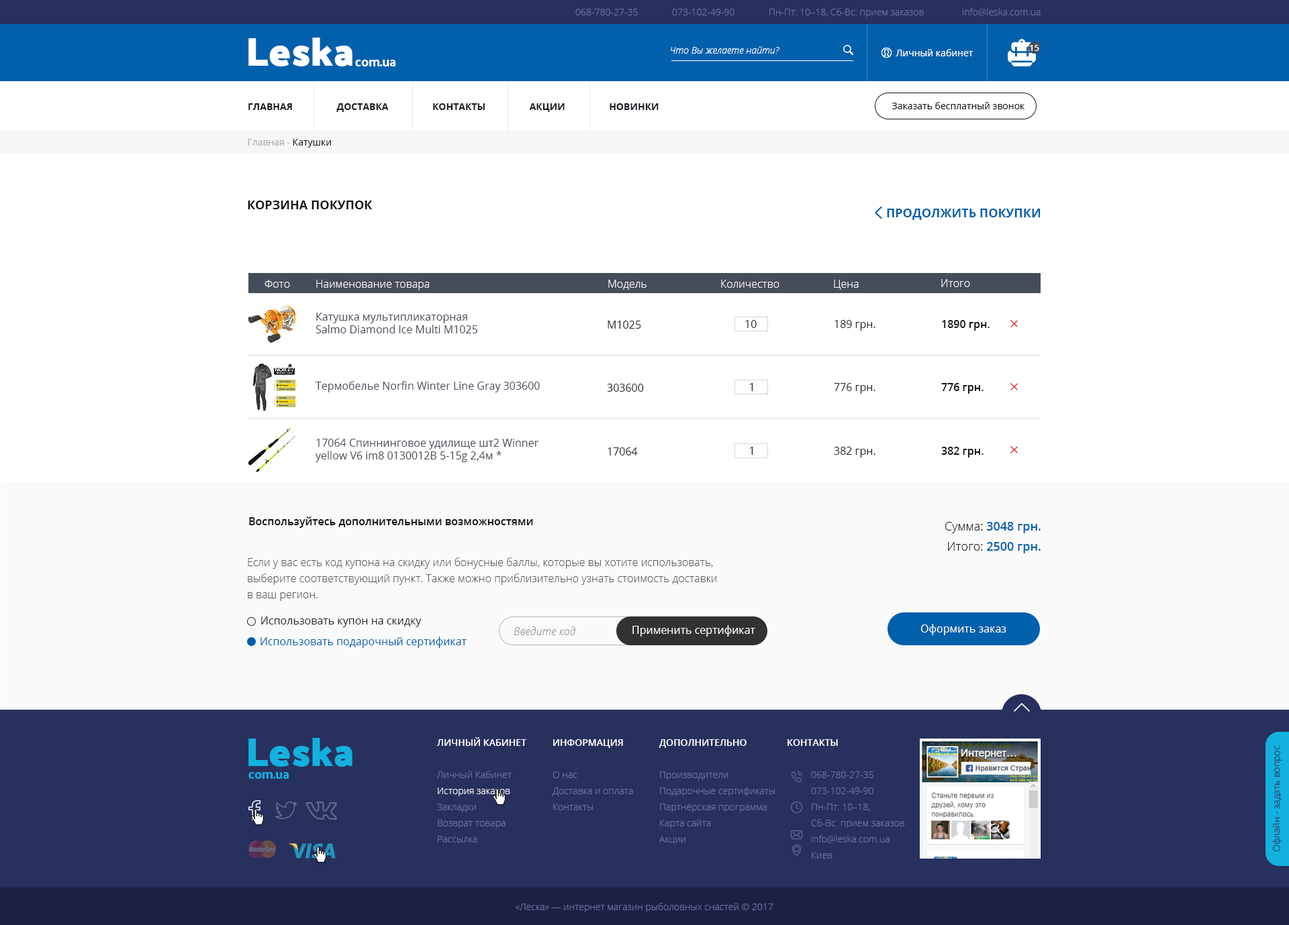
<style>
.page{position:relative;width:1289px;height:925px;background:#ffffff}
.page>*{position:absolute;margin:0}
.t1{font:9.4px "OpenSans-Light";color:#6973a9}
.t2{font:40.5px "PalanquinDark-Bold";color:#ffffff}
.t3{font:9.4px "OpenSansLight-Italic";color:#ffffff}
.t4{font:9.4px "OpenSans";color:#ffffff}
.t5{font:8.7px "OpenSans-Semibold";color:#ffffff}
.t6{font:12.6px "PalanquinDark-Medium";color:#ffffff}
.t7{font:9.4px "OpenSans-Bold";color:#181b21;text-transform:uppercase}
.t8{font:9.4px "OpenSans";color:#12171f}
.t9{font:9.4px "OpenSans";color:#aeaeaf}
.t10{font:9.4px "OpenSans";color:#1e232c}
.t11{font:12.1px "OpenSans-Bold";color:#101216;text-transform:uppercase}
.t12{font:12.1px "OpenSans-Bold";color:#0160ac;text-transform:uppercase}
.t13{font:10.7px "OpenSans-Light";color:#ffffff}
.t14{font:10.7px "OpenSans";color:#464d5a}
.t15{font:10.7px "OpenSans";color:#1e232c}
.t16{font:10.7px "OpenSans-Semibold";color:#101216}
.t17{font:12.1px/20.1px "OpenSans-Semibold";color:#0160ac}
.t18{font:12.1px/20.1px "OpenSans-Light";color:#101216}
.t19{font:10.7px/16.1px "OpenSans-Light";color:#5c5c5c}
.t20{font:10.7px "OpenSansLight-Italic";color:#979797}
.t21{font:10.7px "OpenSans";color:#ffffff}
.t22{font:10.7px "OpenSans";color:#0160ac}
.t23{font:9.4px/16.1px "OpenSans-Light";color:#6973a8}
.t24{font:9.4px/16.1px "OpenSans-Semibold";color:#ffffff}
.t25{font:9.4px/16.1px "OpenSans-Light";color:#ffffff}
.t26{font:40.5px "PalanquinDark-Bold";color:#12b1df}
.t27{font:9.4px/11.4px "OpenSans-Light";color:#6973a8}
.t28{font:9.4px "OpenSans-Light";color:#28305e}
.t29{font:12.6px "PalanquinDark-Medium";color:#12b1df}
.t30{font:9.4px "OpenSans-Light";color:#6973a8}
</style>
<div class="page">
<p class="t1" style="left:575px;top:8px;width:465px;height:9px">068-780-27-35  073-102-49-90  Пн-Пт: 10–18, Cб-Вс: прием заказов  info@leska.com.ua</p>
<p class="t2" style="left:248px;top:38px;width:104px;height:28px">Leska</p>
<p class="t3" style="left:670px;top:46px;width:109px;height:8px">Что Вы желаете найти?</p>
<p class="t4" style="left:895px;top:49px;width:78px;height:7px">Личный кабинет</p>
<p class="t5" style="left:1029px;top:45px;width:10px;height:6px">15</p>
<p class="t6" style="left:355px;top:60px;width:40px;height:6px">com.ua</p>
<p class="t7" style="left:248px;top:103px;width:410px;height:9px">Главная                  Доставка                  Контакты                  Акции                  Новинки</p>
<p class="t8" style="left:891px;top:102px;width:134px;height:7px">Заказать бесплатный звонок</p>
<p class="t9" style="left:248px;top:139px;width:83px;height:9px">Главная - <span class="t10">Катушки</span></p>
<p class="t11" style="left:248px;top:201px;width:124px;height:8px">Корзина покупок</p>
<p class="t12" style="left:887px;top:209px;width:153px;height:11px">продолжить покупки</p>
<p class="t13" style="left:264px;top:280px;width:26px;height:8px">Фото</p>
<p class="t13" style="left:316px;top:280px;width:113px;height:11px">Наименование товара</p>
<p class="t13" style="left:608px;top:280px;width:38px;height:10px">Модель</p>
<p class="t13" style="left:721px;top:280px;width:58px;height:8px">Количество</p>
<p class="t13" style="left:834px;top:280px;width:24px;height:10px">Цена</p>
<p class="t13" style="left:941px;top:279px;width:29px;height:8px">Итого</p>
<p class="t14" style="left:315px;top:313px;width:163px;height:21px">Катушка мультипликаторная<br>Salmo Diamond Ice Multi M1025</p>
<p class="t15" style="left:607px;top:321px;width:34px;height:8px">M1025</p>
<p class="t15" style="left:745px;top:320px;width:11px;height:8px">10</p>
<p class="t15" style="left:834px;top:320px;width:41px;height:11px">189 грн.</p>
<p class="t16" style="left:942px;top:320px;width:47px;height:11px">1890 грн.</p>
<p class="t14" style="left:315px;top:381px;width:225px;height:12px">Термобелье Norfin Winter Line Gray 303600</p>
<p class="t15" style="left:607px;top:384px;width:37px;height:8px">303600</p>
<p class="t15" style="left:750px;top:383px;width:3px;height:8px">1</p>
<p class="t15" style="left:834px;top:383px;width:41px;height:11px">776 грн.</p>
<p class="t16" style="left:941px;top:383px;width:42px;height:11px">776 грн.</p>
<p class="t14" style="left:315px;top:439px;width:223px;height:23px">17064 Спиннинговое удилище шт2 Winner yellow V6 im8 0130012B 5-15g 2,4м *</p>
<p class="t15" style="left:607px;top:448px;width:31px;height:8px">17064</p>
<p class="t15" style="left:750px;top:447px;width:3px;height:8px">1</p>
<p class="t15" style="left:834px;top:447px;width:41px;height:11px">382 грн.</p>
<p class="t16" style="left:941px;top:447px;width:42px;height:11px">382 грн.</p>
<p class="t16" style="left:249px;top:517px;width:284px;height:11px">Воспользуйтесь дополнительными возможностями</p>
<p class="t17" style="left:945px;top:522px;width:95px;height:32px;text-align:right"><span class="t18">Сумма: </span>3048 грн.<br><span class="t18">Итого: </span>2500 грн.</p>
<p class="t19" style="left:248px;top:558px;width:469px;height:43px">Если у вас есть код купона на скидку или бонусные баллы, которые вы хотите использовать, выберите соответствующий пункт. Также можно приблизительно узнать стоимость доставки в ваш регион.</p>
<p class="t15" style="left:261px;top:617px;width:160px;height:10px">Использовать купон на скидку</p>
<p class="t20" style="left:513px;top:627px;width:62px;height:9px">Введите код</p>
<p class="t21" style="left:632px;top:625px;width:123px;height:12px">Применить сертификат</p>
<p class="t21" style="left:920px;top:624px;width:86px;height:12px">Оформить заказ</p>
<p class="t22" style="left:260px;top:637px;width:206px;height:11px">Использовать подарочный сертификат</p>
<p class="t23" style="left:436px;top:738px;width:90px;height:105px"><span class="t24">ЛИЧНЫЙ КАБИНЕТ<br><br></span>Личный Кабинет<br><span class="t25">История заказов<br></span>Закладки<br>Возврат товара<br>Рассылка</p>
<p class="t26" style="left:248px;top:738px;width:104px;height:29px">Leska</p>
<p class="t23" style="left:552px;top:740px;width:81px;height:71px"><span class="t24">ИНФОРМАЦИЯ<br><br></span>О нас<br>Доставка и оплата<br>Контакты</p>
<p class="t23" style="left:659px;top:740px;width:115px;height:105px"><span class="t24">ДОПОЛНИТЕЛЬНО<br><br></span>Производители<br>Подарочные сертификаты<br>Партнёрская программа<br>Карта сайта<br>Акции</p>
<p class="t23" style="left:787px;top:740px;width:117px;height:119px"><span class="t24">КОНТАКТЫ<br><br></span> 068-780-27-35<br> 073-102-49-90<br> Пн-Пт: 10–18,<br> Cб-Вс: прием <span class="t27">заказов<br></span> info@leska.com.ua<br> Киев</p>
<p class="t28" style="left:1272px;top:746px;width:10px;height:106px;rotate:-90deg">Офлайн - задать вопрос</p>
<p class="t29" style="left:248px;top:772px;width:41px;height:7px">com.ua</p>
<p class="t30" style="left:515px;top:903px;width:258px;height:10px">«Леска» — интернет магазин рыболовных снастей © 2017</p>
</div>
